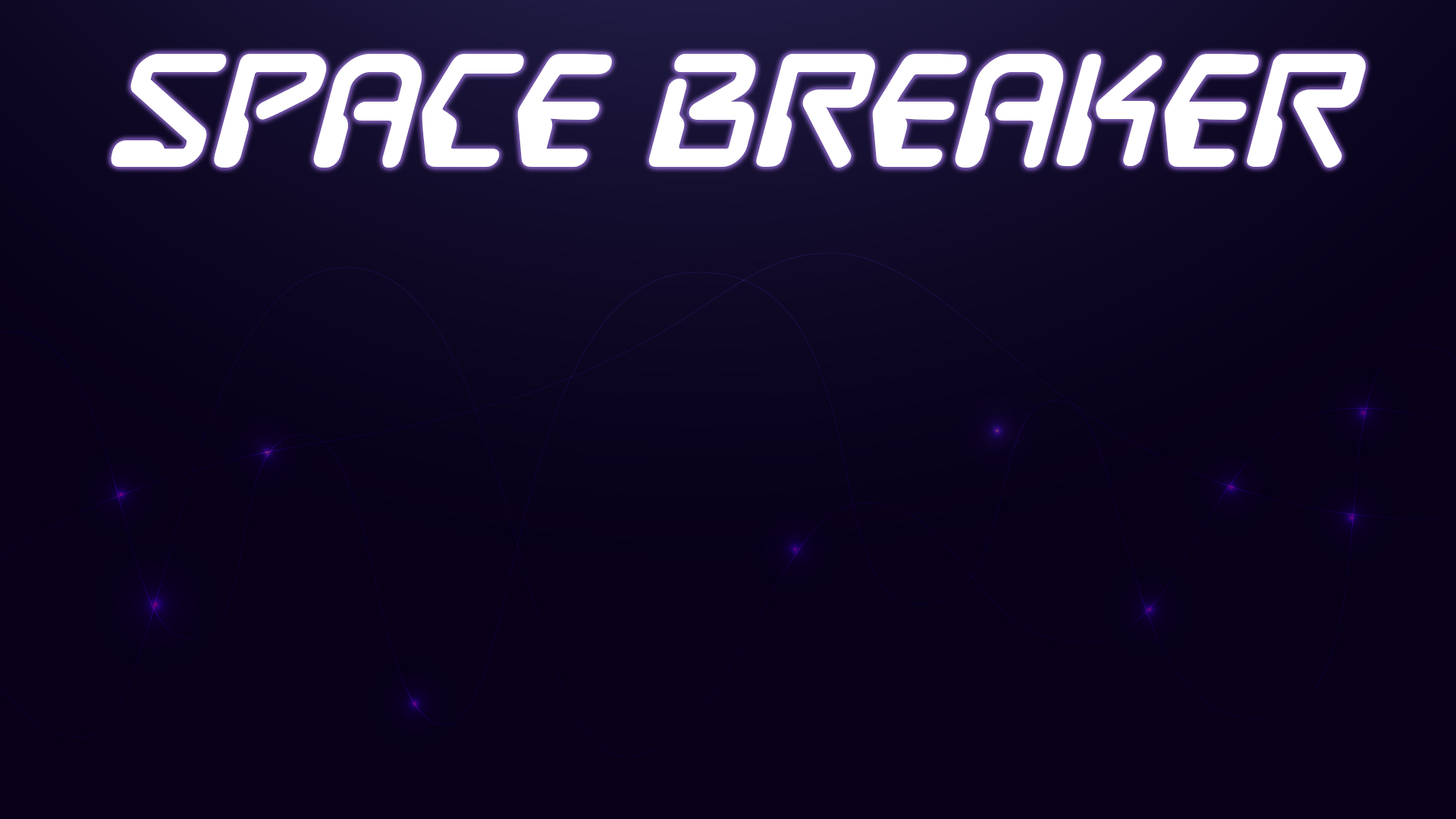
<style>
.page{position:relative;width:1456px;height:819px;background:#070018}
.page>*{position:absolute;margin:0}
.t1{font:136.5px "DestructoBeamBB-Bold";color:#ffffff}
</style>
<div class="page">
<p class="t1" style="left:111px;top:54px;width:1255px;height:114px">SPACE BREAKER</p>
</div>
